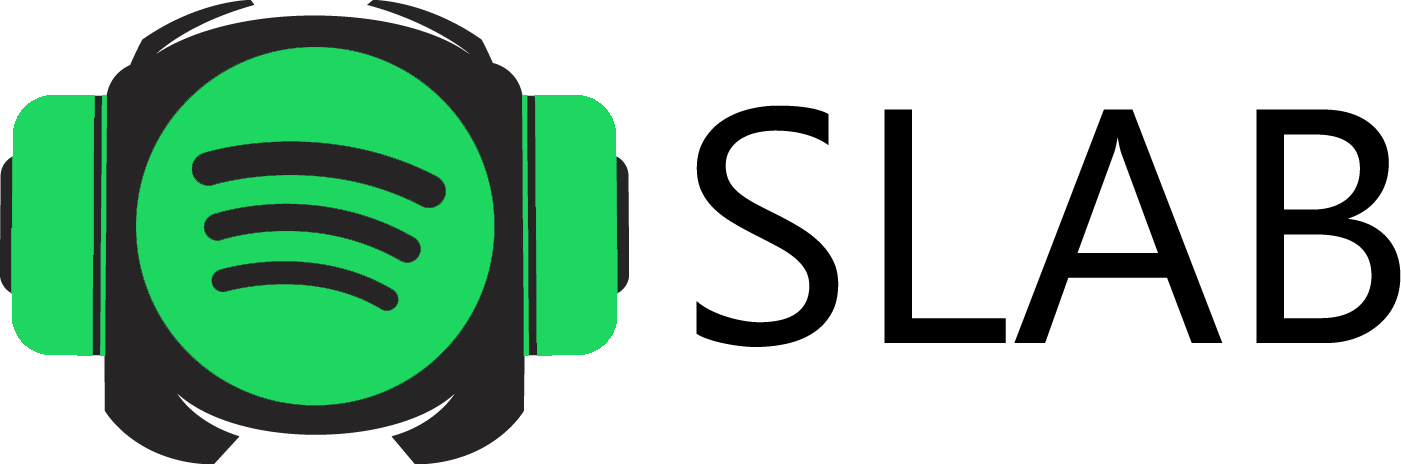
<style>
.page{position:relative;width:1401px;height:464px;background:#ffffff}
.page>*{position:absolute;margin:0}
.t1{font:333.3px "Gadugi";color:#000000}
</style>
<div class="page">
<p class="t1" style="left:696px;top:105px;width:705px;height:242px">SLAB</p>
</div>
